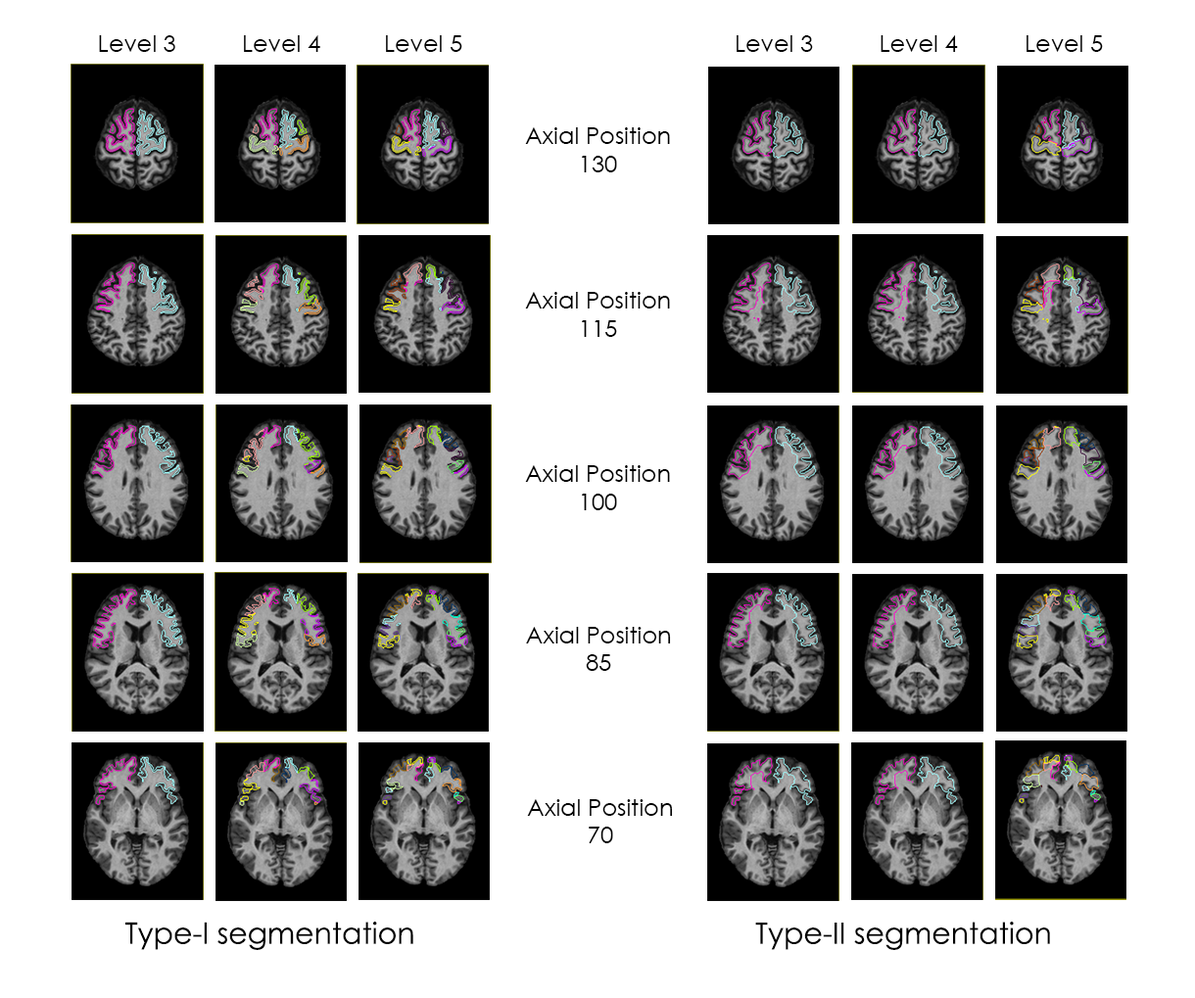
<style>
.page{position:relative;width:1195px;height:998px;background:#ffffff}
.page>*{position:absolute;margin:0}
.t1{font:23.5px "CenturyGothic";color:#000000}
.t2{font:29.4px "CenturyGothic";color:#000000}
</style>
<div class="page">
<p class="t1" style="left:99px;top:35px;width:76px;height:17px">Level 3</p>
<p class="t1" style="left:244px;top:35px;width:76px;height:17px">Level 4</p>
<p class="t1" style="left:386px;top:35px;width:76px;height:17px">Level 5</p>
<p class="t1" style="left:736px;top:35px;width:77px;height:17px">Level 3</p>
<p class="t1" style="left:880px;top:35px;width:78px;height:17px">Level 4</p>
<p class="t1" style="left:1026px;top:35px;width:77px;height:17px">Level 5</p>
<p class="t1" style="left:525px;top:127px;width:145px;height:45px;text-align:center">Axial Position<br>130</p>
<p class="t1" style="left:525px;top:292px;width:145px;height:45px;text-align:center">Axial Position<br>115</p>
<p class="t1" style="left:525px;top:465px;width:145px;height:45px;text-align:center">Axial Position<br>100</p>
<p class="t1" style="left:526px;top:627px;width:145px;height:44px;text-align:center">Axial Position<br>85</p>
<p class="t1" style="left:527px;top:799px;width:146px;height:44px;text-align:center">Axial Position<br>70</p>
<p class="t2" style="left:125px;top:922px;width:288px;height:28px">Type-I segmentation</p>
<p class="t2" style="left:755px;top:922px;width:295px;height:28px">Type-II segmentation</p>
</div>
